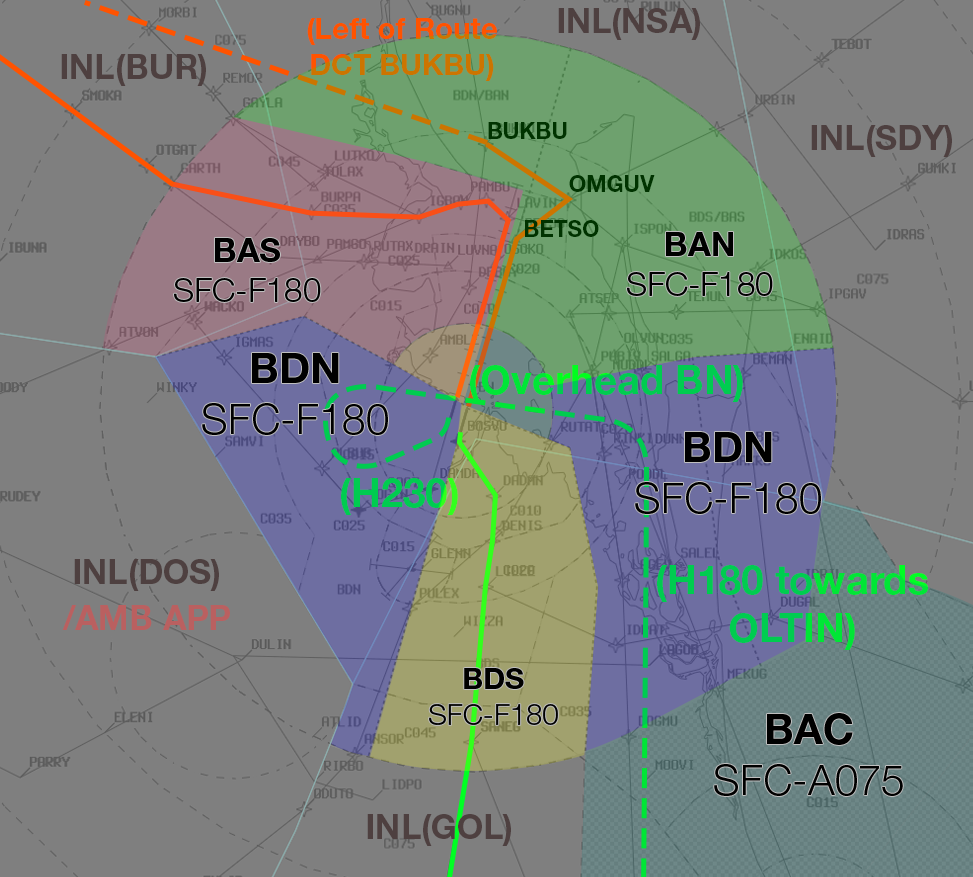
<style>
.page{position:relative;width:973px;height:877px;background:#7f7f7f}
.page>*{position:absolute;margin:0}
.t1{font:33.9px "HelveticaNeueLTStd-Bd";color:#4e4040}
.t2{font:29.4px "HelveticaNeueLTStd-Bd"}
.t3{font:22.9px "HelveticaNeueLTStd-Bd";color:#003300}
.t4{font:33.3px "HelveticaNeueLTStd-Lt";color:#000000}
.t5{font:33.3px "HelveticaNeueLTStd-Bd";color:#000000}
.t6{font:42.2px "HelveticaNeueLTStd-Lt";color:#000000}
.t7{font:42.2px "HelveticaNeueLTStd-Bd";color:#000000}
.t8{font:40px "HelveticaNeueLTStd-Bd"}
.t9{font:40px "HelveticaNeueLTStd-Bd";color:#00cc50}
.t10{font:33.9px "HelveticaNeueLTStd-Bd";color:#ba6060}
.t11{font:29.4px "HelveticaNeueLTStd-Lt";color:#000000}
.t12{font:29.4px "HelveticaNeueLTStd-Bd";color:#000000}
</style>
<div class="page">
<p class="t1" style="left:558px;top:8px;width:142px;height:32px">INL(NSA)</p>
<p class="t2" style="left:307px;top:18px;width:190px;height:63px;text-align:center">(Left of Route<br>DCT BUKBU)</p>
<p class="t1" style="left:61px;top:54px;width:145px;height:32px">INL(BUR)</p>
<p class="t3" style="left:488px;top:122px;width:79px;height:17px">BUKBU</p>
<p class="t1" style="left:811px;top:125px;width:141px;height:32px">INL(SDY)</p>
<p class="t3" style="left:569px;top:175px;width:86px;height:17px">OMGUV</p>
<p class="t3" style="left:525px;top:220px;width:74px;height:17px">BETSO</p>
<p class="t4" style="left:627px;top:232px;width:146px;height:64px;text-align:center"><span class="t5">BAN<br></span>SFC-F180</p>
<p class="t4" style="left:174px;top:238px;width:147px;height:64px;text-align:center"><span class="t5">BAS<br></span>SFC-F180</p>
<p class="t6" style="left:202px;top:353px;width:186px;height:82px;text-align:center"><span class="t7">BDN<br></span>SFC-F180</p>
<p class="t8" style="left:470px;top:365px;width:273px;height:37px">(Overhead BN)</p>
<p class="t6" style="left:635px;top:432px;width:186px;height:82px;text-align:center"><span class="t7">BDN<br></span>SFC-F180</p>
<p class="t9" style="left:341px;top:478px;width:117px;height:37px">(H230)</p>
<p class="t1" style="left:74px;top:559px;width:145px;height:32px">INL(DOS)</p>
<p class="t8" style="left:657px;top:565px;width:271px;height:85px;text-align:center">(H180 towards<br>OLTIN)</p>
<p class="t10" style="left:62px;top:605px;width:168px;height:25px">/AMB APP</p>
<p class="t11" style="left:429px;top:668px;width:129px;height:57px;text-align:center"><span class="t12">BDS<br></span>SFC-F180</p>
<p class="t6" style="left:714px;top:713px;width:189px;height:83px;text-align:center"><span class="t7">BAC<br></span>SFC-A075</p>
<p class="t1" style="left:367px;top:814px;width:144px;height:32px">INL(GOL)</p>
</div>
